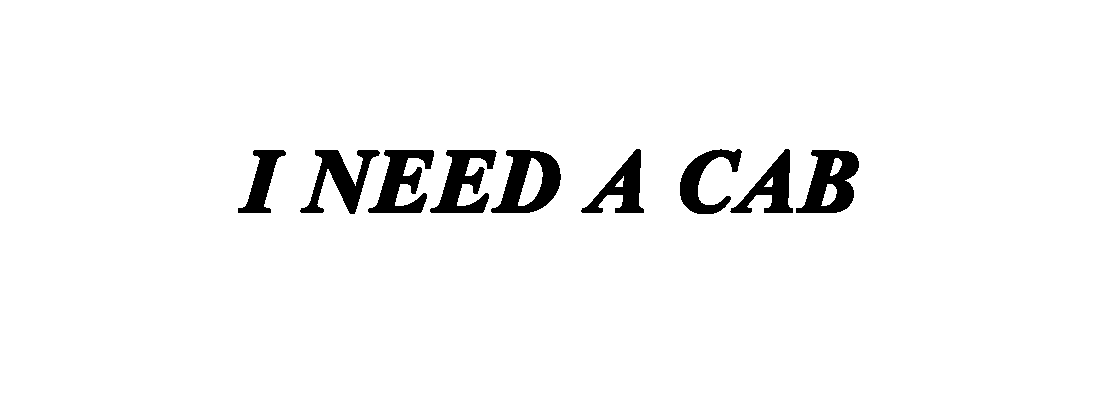
<style>
.page{position:relative;width:1100px;height:400px;background:#ffffff}
.page>*{position:absolute;margin:0}
.t1{font:110px "Vijaya-Bold";color:#000000;font-weight:bold}
</style>
<div class="page">
<p class="t1" style="left:238px;top:149px;width:621px;height:65px">I NEED A CAB</p>
</div>
